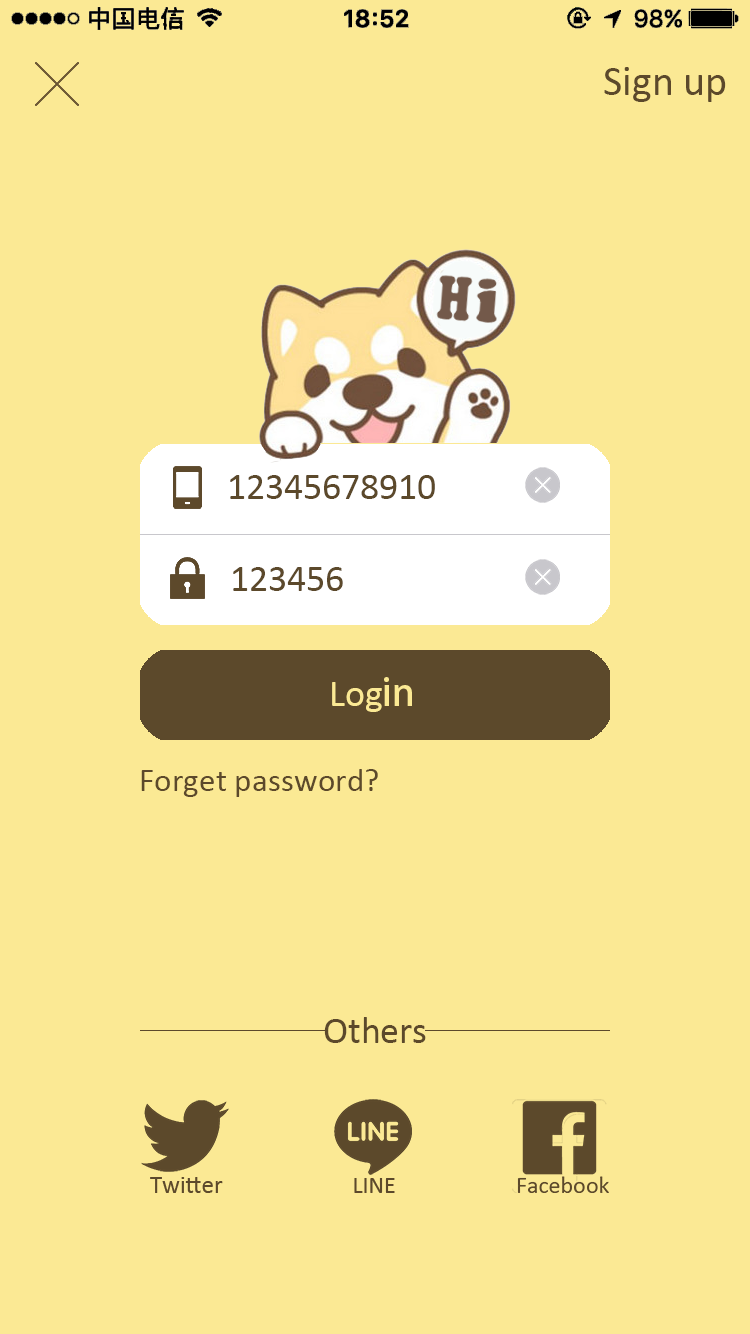
<style>
.page{position:relative;width:750px;height:1334px;background:#fbe994}
.page>*{position:absolute;margin:0}
.t1{font:41.7px "Calibri";color:#5c492b}
.t2{font:37.5px "Calibri";color:#5c492b}
.t3{font:37.5px "Calibri";color:#fbe994}
.t4{font:37.5px "AdobeHeitiStd-Regular";color:#fbe994}
.t5{font:33.3px "Calibri";color:#5c492b}
</style>
<div class="page">
<p class="t1" style="left:604px;top:67px;width:122px;height:35px">Sign up</p>
<p class="t2" style="left:230px;top:475px;width:205px;height:24px">12345678910</p>
<p class="t2" style="left:233px;top:567px;width:110px;height:24px">123456</p>
<p class="t3" style="left:332px;top:677px;width:80px;height:35px">Log<span class="t4">in</span></p>
<p class="t5" style="left:141px;top:769px;width:237px;height:28px">Forget password?</p>
<p class="t2" style="left:324px;top:1017px;width:102px;height:26px">Others</p>
</div>
